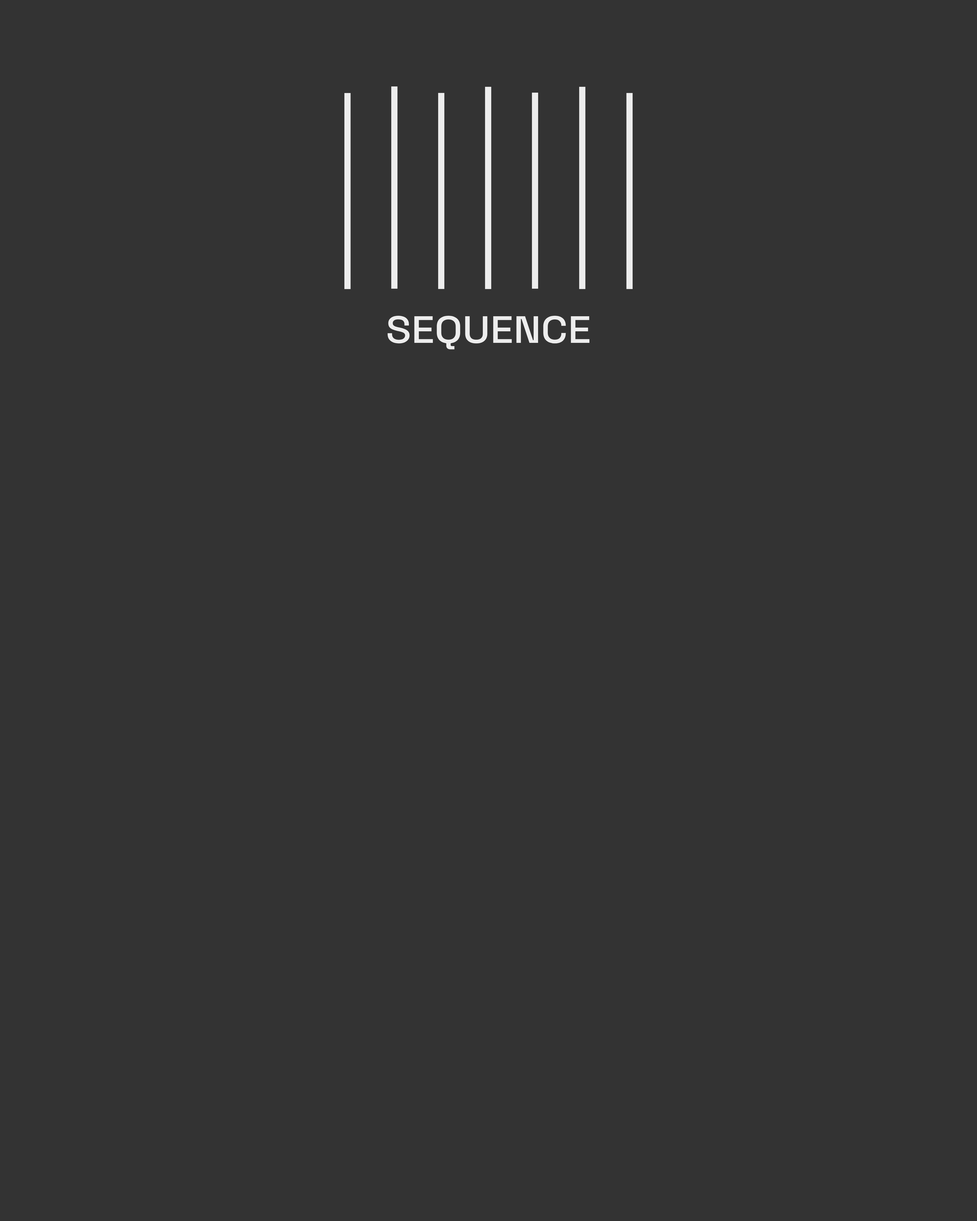
<style>
.page{position:relative;width:977px;height:1221px;background:#333333}
.page>*{position:absolute;margin:0}
.t1{font:38px "SpaceGroteskLight-Medium";color:#ededed;scale:1.09 1}
</style>
<div class="page">
<p class="t1" style="left:387px;top:315px;width:202px;height:34px">SEQUENCE</p>
</div>
